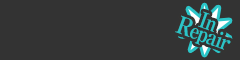
<style>
.page{position:relative;width:240px;height:60px;background:#333333}
.page>*{position:absolute;margin:0}
.t1{font:21.6px/16px "RyuminPro-ExBold";letter-spacing:-0.08em;color:#2bc5c8;scale:0.9 1}
.t2{font:24px/16px "RyuminPro-ExBold";letter-spacing:-0.08em;color:#2bc5c8;scale:0.9 1}
</style>
<div class="page">
<p class="t1" style="left:175px;top:11px;width:56px;height:39px;text-align:center;rotate:20deg">In<br><span class="t2">R</span>epair</p>
</div>
